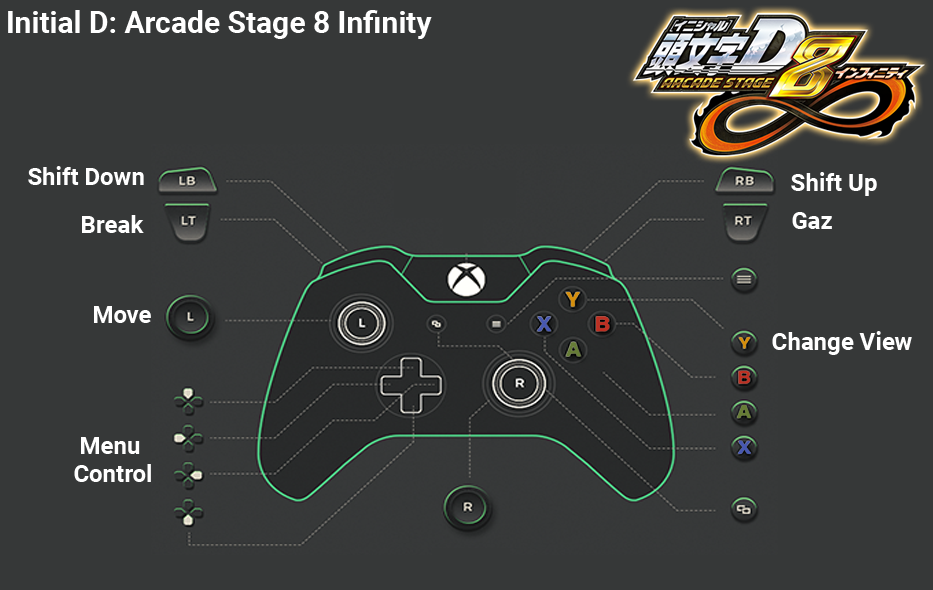
<style>
.page{position:relative;width:933px;height:590px;background:#363838}
.page>*{position:absolute;margin:0}
.t1{font:30px "Roboto-Bold";color:#ffffff}
.t2{font:24px "Roboto-Bold";color:#ffffff}
.t3{font:24px/28px "Roboto-Bold";color:#ffffff}
</style>
<div class="page">
<p class="t1" style="left:8px;top:10px;width:424px;height:29px">Initial D: Arcade Stage 8 Infinity</p>
<p class="t2" style="left:28px;top:166px;width:116px;height:19px">Shift Down</p>
<p class="t2" style="left:791px;top:172px;width:86px;height:24px">Shift Up</p>
<p class="t2" style="left:82px;top:215px;width:62px;height:18px">Break</p>
<p class="t2" style="left:792px;top:212px;width:40px;height:17px">Gaz</p>
<p class="t2" style="left:94px;top:306px;width:57px;height:17px">Move</p>
<p class="t2" style="left:772px;top:331px;width:140px;height:24px">Change View</p>
<p class="t3" style="left:74px;top:437px;width:77px;height:45px;text-align:center">Menu <br>Control</p>
</div>
